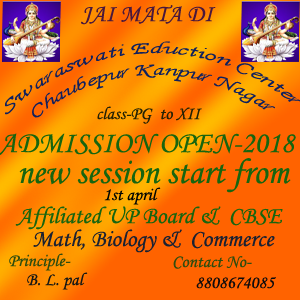
<style>
.page{position:relative;width:300px;height:300px;background:#ff6300}
.page>*{position:absolute;margin:0}
.t1{font:24px "MonotypeCorsiva";color:#4a183c}
.t2{font:18px "MonotypeCorsiva";color:#0f205f}
.t3{font:18px "MonotypeCorsiva";color:#242204}
.t4{font:36px "MonotypeCorsiva";color:#17650f;scale:0.96 1}
.t5{font:18px "MonotypeCorsiva";color:#030702}
.t6{font:24px "MonotypeCorsiva";color:#17650f}
.t7{font:24px "MonotypeCorsiva";color:#1a2132}
.t8{font:18px "MonotypeCorsiva";color:#304d0e}
.t9{font:18px "MonotypeCorsiva";color:#161815}
.t10{font:18px "MonotypeCorsiva";color:#0d0b0d}
</style>
<div class="page">
<p class="t1" style="left:81px;top:5px;width:135px;height:20px">JAI MATA DI</p>
<p class="t2" style="left:5px;top:41px;width:297px;height:77px;text-align:center">Swaraswati Eduction Center  <br>Chaubepur Kanpur Nagar</p>
<p class="t3" style="left:97px;top:106px;width:105px;height:18px">class-PG  to XII</p>
<p class="t4" style="left:19px;top:158px;width:272px;height:35px">new session start from</p>
<p class="t5" style="left:104px;top:187px;width:57px;height:18px">1st april</p>
<p class="t6" style="left:15px;top:206px;width:268px;height:24px">Affiliated UP Board &amp;  CBSE</p>
<p class="t7" style="left:33px;top:229px;width:242px;height:24px">Math, Biology &amp;  Commerce</p>
<p class="t8" style="left:9px;top:253px;width:62px;height:18px">Principle-</p>
<p class="t8" style="left:173px;top:256px;width:79px;height:13px">Contact No-</p>
<p class="t9" style="left:27px;top:272px;width:61px;height:18px">B. L. pal</p>
<p class="t10" style="left:196px;top:277px;width:80px;height:12px">8808674085</p>
</div>
